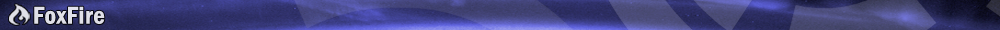
<style>
.page{position:relative;width:1000px;height:30px}
.page>*{position:absolute;margin:0}
.t1{font:25px "FranklinGothic-DemiCond";letter-spacing:0.025em;color:#e0e0e8}
</style>
<div class="page">
<p class="t1" style="left:34px;top:6px;width:71px;height:18px">FoxFire</p>
</div>
